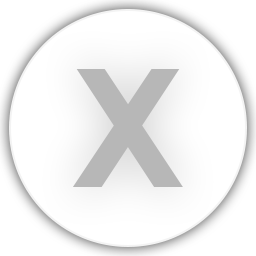
<style>
.page{position:relative;width:256px;height:256px;background:#ffffff}
.page>*{position:absolute;margin:0}
.t1{font:165.3px "Arial-BoldMT";color:#b7b7b7}
</style>
<div class="page">
<p class="t1" style="left:72px;top:69px;width:111px;height:118px">X</p>
</div>
